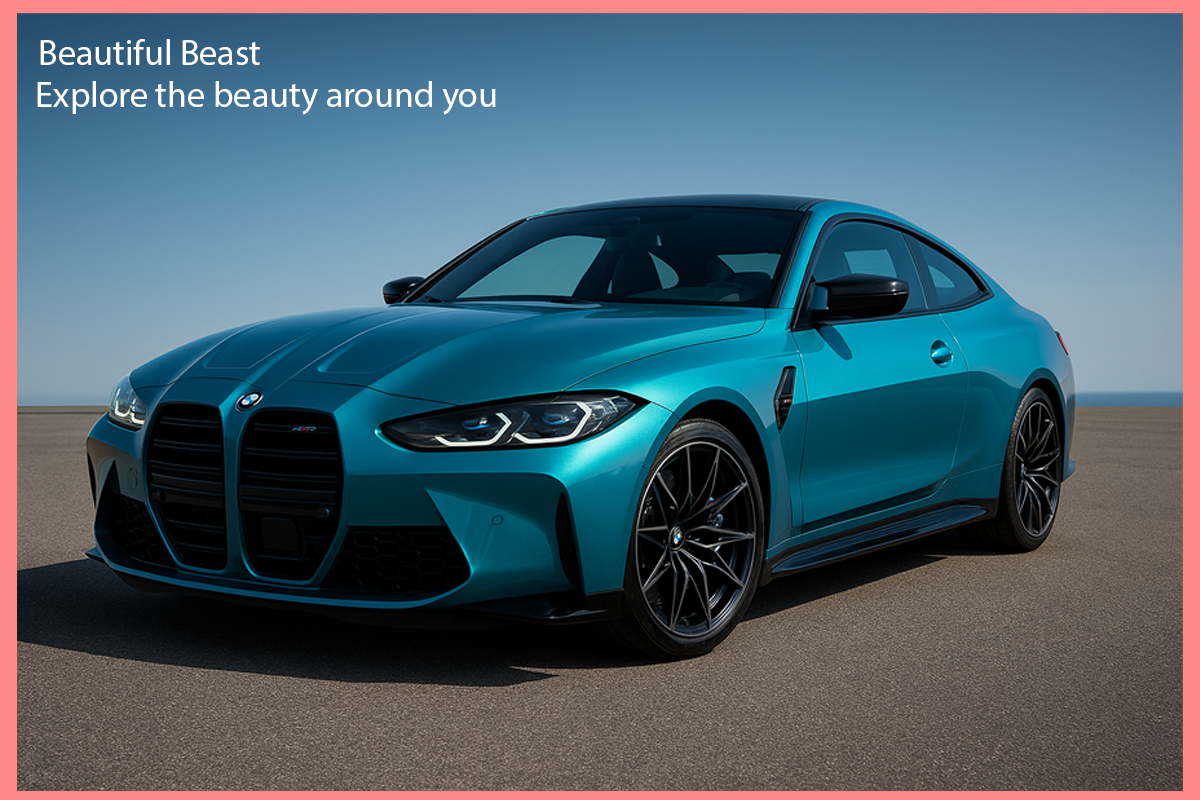
<style>
.page{position:relative;width:1200px;height:800px}
.page>*{position:absolute;margin:0}
.t1{font:36px "MyriadPro-Regular";color:#ffffff}
</style>
<div class="page">
<p class="t1" style="left:40px;top:39px;width:220px;height:26px">Beautiful Beast</p>
<p class="t1" style="left:37px;top:81px;width:459px;height:34px">Explore the beauty around you</p>
</div>
